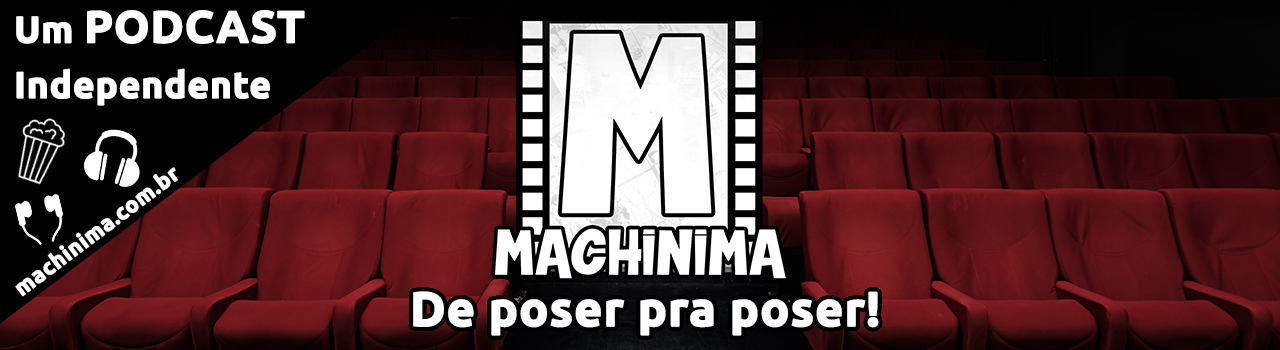
<style>
.page{position:relative;width:1280px;height:350px}
.page>*{position:absolute;margin:0}
.t1{font:36.9px/55.4px "Ubuntu-Bold";color:#ffffff;font-weight:bold}
.t2{font:44.8px/55.4px "Ubuntu-Bold";color:#ffffff;font-weight:bold}
.t3{font:22.4px "Ubuntu-Bold";color:#ffffff;font-weight:bold}
.t4{font:48px "Ubuntu-Bold";color:#ffffff;font-weight:bold}
</style>
<div class="page">
<p class="t1" style="left:16px;top:10px;width:289px;height:96px">Um <span class="t2">PODCAST</span> Independente</p>
<p class="t3" style="left:15px;top:167px;width:163px;height:130px;rotate:-37deg">machinima.com.br</p>
<p class="t4" style="left:413px;top:291px;width:466px;height:45px">De poser pra poser!</p>
</div>
